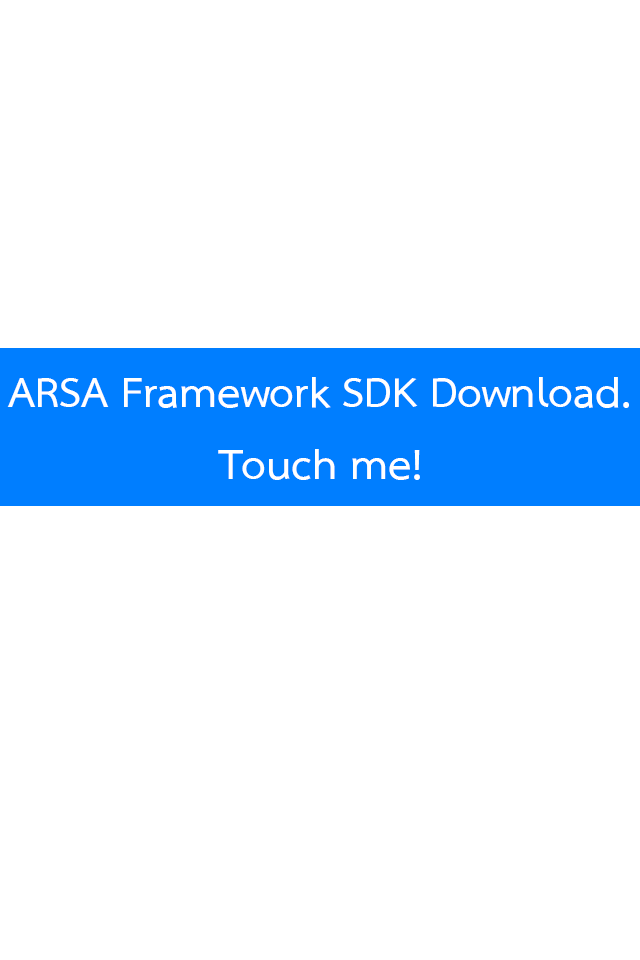
<style>
.page{position:relative;width:640px;height:960px;background:#ffffff}
.page>*{position:absolute;margin:0}
.t1{font:59.8px "THSarabunPSK-Bold";color:#ffffff}
</style>
<div class="page">
<p class="t1" style="left:7px;top:377px;width:622px;height:103px;text-align:center">ARSA Framework SDK Download.<br>Touch me!</p>
</div>
